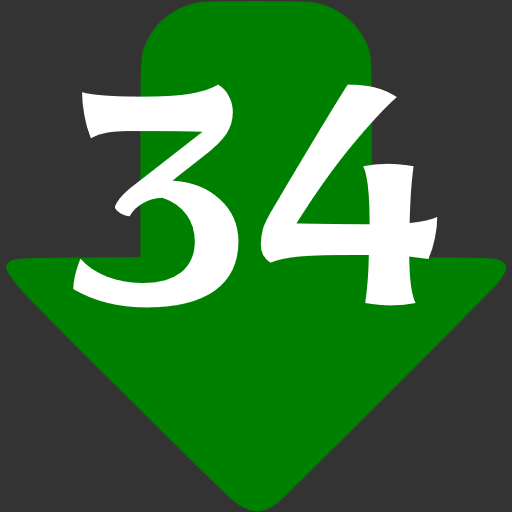
<style>
.page{position:relative;width:512px;height:512px;background:#333333}
.page>*{position:absolute;margin:0}
.t1{font:400px "Mirza-Medium";color:#ffffff}
</style>
<div class="page">
<p class="t1" style="left:73px;top:84px;width:365px;height:224px">34</p>
</div>
